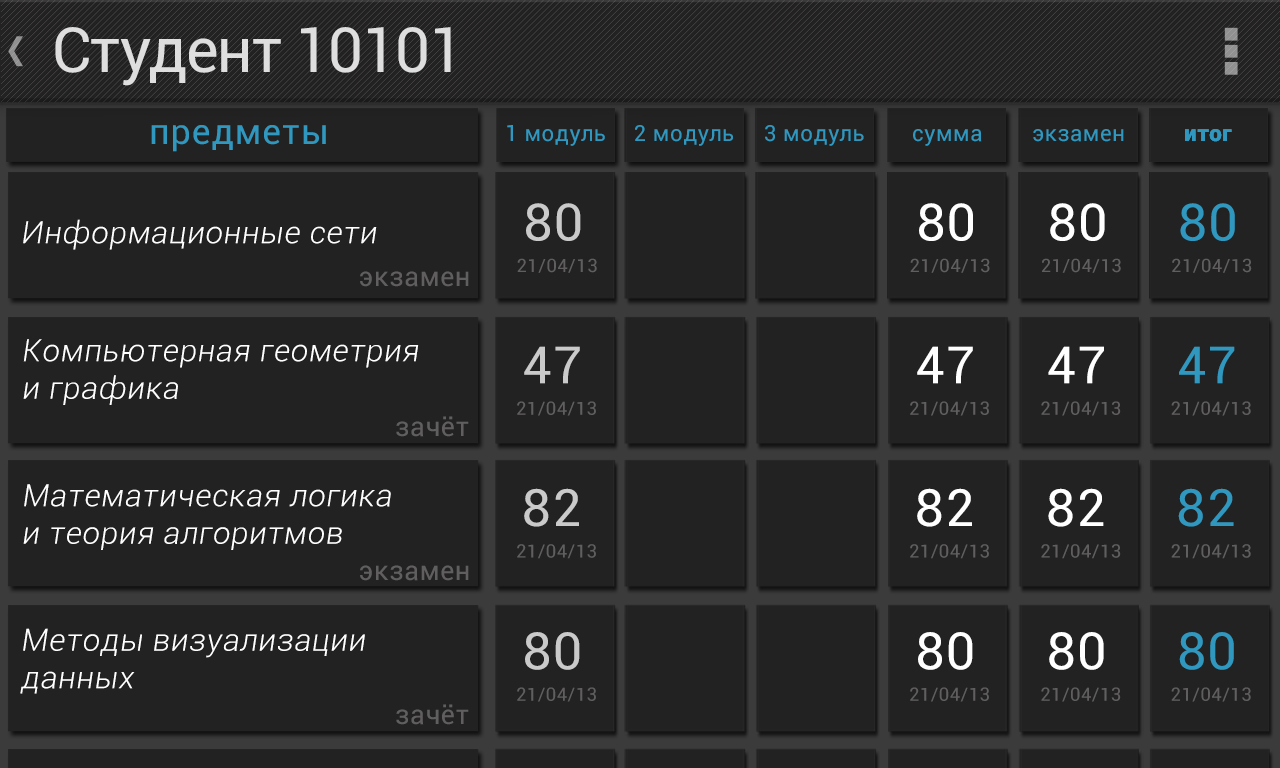
<style>
.page{position:relative;width:1280px;height:768px;background:#222222}
.page>*{position:absolute;margin:0}
.t1{font:62.2px "Roboto-Regular";letter-spacing:-0.025em;color:#dedede}
.t2{font:35.6px "Roboto-Regular";letter-spacing:0.026em;color:#3097be}
.t3{font:22.2px "Roboto-Regular";letter-spacing:0.026em;color:#3097be}
.t4{font:22.2px "Roboto-Black";letter-spacing:0.026em;color:#3097be}
.t5{font:51.4px "Roboto-Regular";letter-spacing:0.026em;color:#cacaca}
.t6{font:51.4px "Roboto-Regular";letter-spacing:0.026em;color:#ffffff}
.t7{font:51.4px "Roboto-Regular";letter-spacing:0.026em;color:#3097be}
.t8{font:31.1px "Roboto-LightItalic";letter-spacing:0.026em;color:#ffffff}
.t9{font:18.4px "Roboto-Regular";letter-spacing:0.026em;color:#605e5e}
.t10{font:26.7px "Roboto-Regular";letter-spacing:0.026em;color:#605e5e}
</style>
<div class="page">
<p class="t1" style="left:55px;top:27px;width:396px;height:59px">Студент 10101</p>
<p class="t2" style="left:151px;top:125px;width:175px;height:27px">предметы</p>
<p class="t3" style="left:507px;top:125px;width:98px;height:21px">1 модуль</p>
<p class="t3" style="left:635px;top:125px;width:98px;height:21px">2 модуль</p>
<p class="t3" style="left:765px;top:125px;width:99px;height:21px">3 модуль</p>
<p class="t3" style="left:913px;top:129px;width:69px;height:17px">сумма</p>
<p class="t3" style="left:1033px;top:129px;width:91px;height:13px">экзамен</p>
<p class="t4" style="left:1185px;top:129px;width:47px;height:13px">итог</p>
<p class="t4" style="left:1185px;top:129px;width:47px;height:13px">итог</p>
<p class="t5" style="left:526px;top:203px;width:55px;height:38px">80</p>
<p class="t6" style="left:919px;top:203px;width:54px;height:38px">80</p>
<p class="t6" style="left:1050px;top:203px;width:55px;height:38px">80</p>
<p class="t7" style="left:1180px;top:203px;width:55px;height:38px">80</p>
<p class="t8" style="left:23px;top:219px;width:354px;height:31px">Информационные сети</p>
<p class="t9" style="left:517px;top:258px;width:80px;height:15px">21/04/13</p>
<p class="t9" style="left:910px;top:258px;width:80px;height:15px">21/04/13</p>
<p class="t9" style="left:1042px;top:258px;width:79px;height:15px">21/04/13</p>
<p class="t9" style="left:1172px;top:258px;width:80px;height:15px">21/04/13</p>
<p class="t10" style="left:360px;top:271px;width:109px;height:16px">экзамен</p>
<p class="t8" style="left:23px;top:339px;width:396px;height:66px">Компьютерная геометрия <br>и графика</p>
<p class="t5" style="left:524px;top:346px;width:56px;height:38px">47</p>
<p class="t6" style="left:917px;top:346px;width:56px;height:38px">47</p>
<p class="t6" style="left:1048px;top:346px;width:56px;height:38px">47</p>
<p class="t7" style="left:1179px;top:346px;width:56px;height:38px">47</p>
<p class="t9" style="left:517px;top:401px;width:79px;height:15px">21/04/13</p>
<p class="t9" style="left:910px;top:401px;width:79px;height:15px">21/04/13</p>
<p class="t9" style="left:1041px;top:401px;width:80px;height:15px">21/04/13</p>
<p class="t9" style="left:1171px;top:401px;width:80px;height:15px">21/04/13</p>
<p class="t10" style="left:396px;top:416px;width:73px;height:21px">зачёт</p>
<p class="t8" style="left:23px;top:484px;width:368px;height:66px">Математическая логика <br>и теория алгоритмов</p>
<p class="t5" style="left:524px;top:488px;width:55px;height:39px">82</p>
<p class="t6" style="left:917px;top:488px;width:55px;height:39px">82</p>
<p class="t6" style="left:1048px;top:488px;width:56px;height:39px">82</p>
<p class="t7" style="left:1178px;top:488px;width:56px;height:39px">82</p>
<p class="t9" style="left:517px;top:544px;width:79px;height:15px">21/04/13</p>
<p class="t9" style="left:910px;top:544px;width:79px;height:15px">21/04/13</p>
<p class="t9" style="left:1041px;top:544px;width:80px;height:15px">21/04/13</p>
<p class="t9" style="left:1171px;top:544px;width:80px;height:15px">21/04/13</p>
<p class="t10" style="left:360px;top:565px;width:109px;height:16px">экзамен</p>
<p class="t8" style="left:20px;top:628px;width:345px;height:66px">Методы визуализации <br>данных</p>
<p class="t5" style="left:525px;top:632px;width:55px;height:38px">80</p>
<p class="t6" style="left:918px;top:632px;width:55px;height:38px">80</p>
<p class="t6" style="left:1049px;top:632px;width:55px;height:38px">80</p>
<p class="t7" style="left:1179px;top:632px;width:55px;height:38px">80</p>
<p class="t9" style="left:517px;top:687px;width:79px;height:15px">21/04/13</p>
<p class="t9" style="left:910px;top:687px;width:79px;height:15px">21/04/13</p>
<p class="t9" style="left:1041px;top:687px;width:80px;height:15px">21/04/13</p>
<p class="t9" style="left:1171px;top:687px;width:80px;height:15px">21/04/13</p>
<p class="t10" style="left:396px;top:704px;width:73px;height:21px">зачёт</p>
</div>
